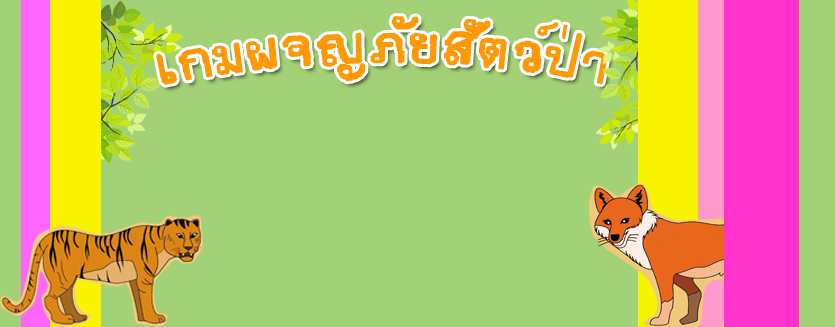
<style>
.page{position:relative;width:835px;height:327px;background:#a3d176}
.page>*{position:absolute;margin:0}
.t1{font:80px "teddy";color:#ff9900}
</style>
<div class="page">
<p class="t1" style="left:156px;top:16px;width:452px;height:69px">เกมผจญภัยสัตว์ป่า</p>
</div>
